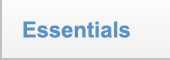
<style>
.page{position:relative;width:170px;height:60px}
.page>*{position:absolute;margin:0}
.t1{font:22px "Arial-BoldMT";color:#5991c9}
</style>
<div class="page">
<p class="t1" style="left:23px;top:21px;width:107px;height:17px">Essentials</p>
</div>
